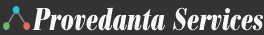
<style>
.page{position:relative;width:264px;height:35px;background:#333333}
.page>*{position:absolute;margin:0}
.t1{font:33px "BodoniEF-BoldCondIta";color:#faf9f9;scale:0.91 1}
</style>
<div class="page">
<p class="t1" style="left:32px;top:7px;width:231px;height:24px">Provedanta Services</p>
</div>
